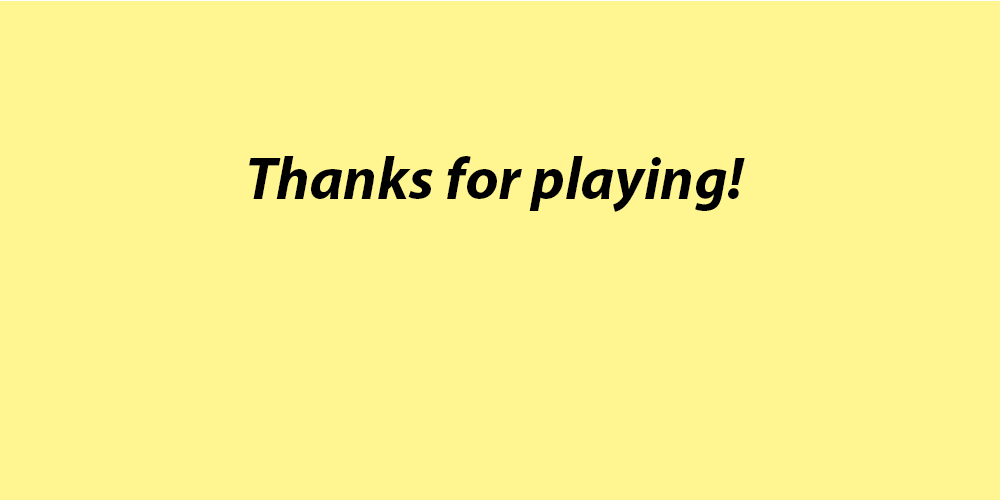
<style>
.page{position:relative;width:1000px;height:500px;background:#fff691}
.page>*{position:absolute;margin:0}
.t1{font:59.9px "MyriadPro-BoldIt";color:#000000}
</style>
<div class="page">
<p class="t1" style="left:249px;top:156px;width:496px;height:56px">Thanks for playing!</p>
</div>
